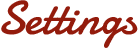
<style>
.page{position:relative;width:139px;height:49px;background:#ffffff}
.page>*{position:absolute;margin:0}
.t1{font:48px "Damion";color:#931b0c}
</style>
<div class="page">
<p class="t1" style="left:1px;top:0px;width:137px;height:48px">Settings</p>
</div>
